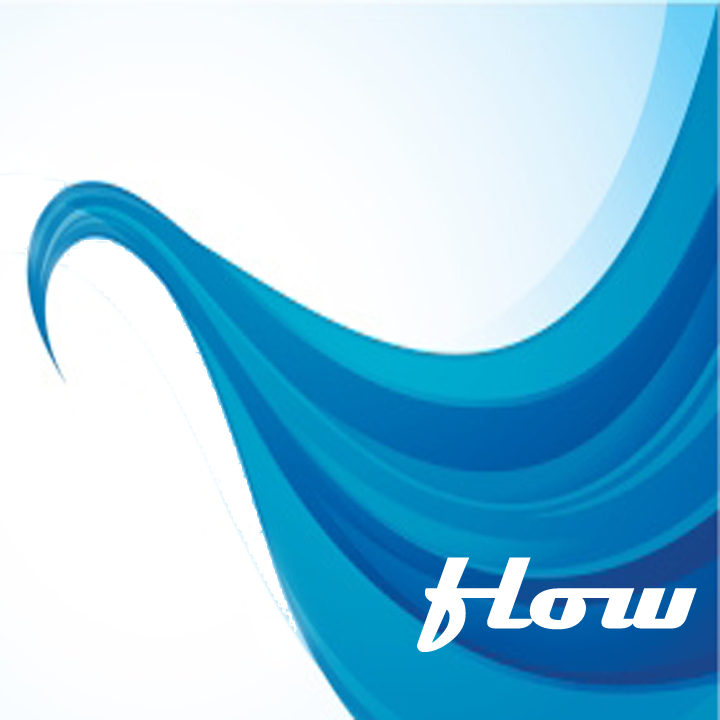
<style>
.page{position:relative;width:720px;height:720px}
.page>*{position:absolute;margin:0}
.t1{font:120px "Magneto-Bold";color:#ffffff}
</style>
<div class="page">
<p class="t1" style="left:417px;top:557px;width:280px;height:95px">flow</p>
</div>
